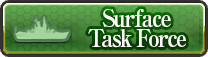
<style>
.page{position:relative;width:208px;height:57px}
.page>*{position:absolute;margin:0}
.t1{font:24px/20px "RyuminPro-ExBold";letter-spacing:-0.08em;color:#fff9f9;scale:0.9 1}
</style>
<div class="page">
<p class="t1" style="left:88px;top:9px;width:98px;height:39px;text-align:center">Surface<br>Task Force</p>
</div>
